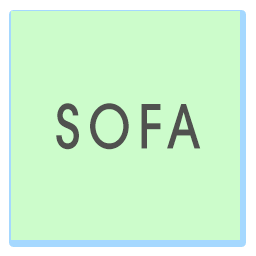
<style>
.page{position:relative;width:256px;height:256px;background:#ccfccb}
.page>*{position:absolute;margin:0}
.t1{font:60px "AvantGarde-Medium";letter-spacing:0.15em;color:#50514f;text-transform:uppercase;scale:0.84 1}
</style>
<div class="page">
<p class="t1" style="left:56px;top:103px;width:145px;height:47px">SOFA</p>
</div>
